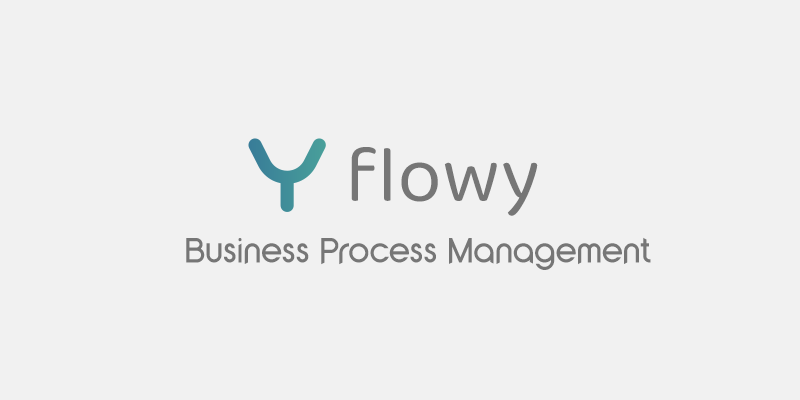
<style>
.page{position:relative;width:800px;height:400px;background:#f1f1f1}
.page>*{position:absolute;margin:0}
.t1{font:80px "Baloo2-Regular";letter-spacing:0.005em;color:#767676}
.t2{font:30px "YaroCut";letter-spacing:0.005em;color:#767676}
</style>
<div class="page">
<p class="t1" style="left:351px;top:147px;width:187px;height:69px">flowy</p>
<p class="t2" style="left:186px;top:237px;width:465px;height:33px">Business Process Management</p>
</div>
